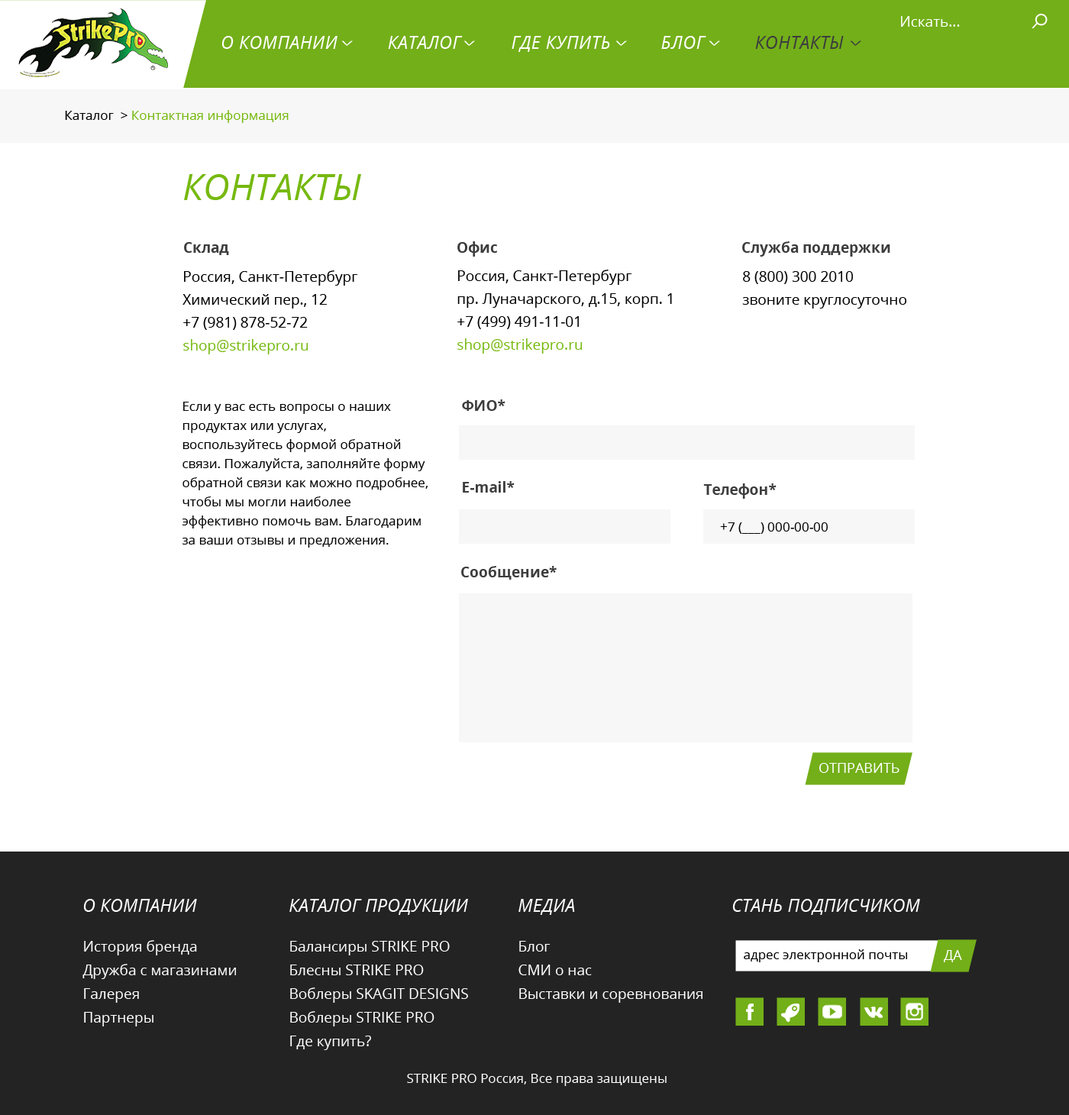
<style>
.page{position:relative;width:1069px;height:1115px;background:#ffffff}
.page>*{position:absolute;margin:0}
.t1{font:14.5px "OpenSans";color:#ffffff}
.t2{font:17.6px "OpenSans-Italic";letter-spacing:0.025em;color:#ffffff;text-transform:uppercase}
.t3{font:17.6px "OpenSans-Italic";letter-spacing:0.025em;color:#3d3d3d;text-transform:uppercase}
.t4{font:22.5px "OpenSans";color:#ffffff;text-transform:uppercase;scale:0.43 1}
.t5{font:22.5px "OpenSans";color:#3d3d3d;text-transform:uppercase;scale:0.43 1}
.t6{font:13px "OpenSans";color:#76b910}
.t7{font:13px "OpenSans";color:#000000}
.t8{font:36.7px "OpenSans-Italic";color:#76b910;text-transform:uppercase}
.t9{font:14.5px "OpenSans-Bold";color:#3d3d3d}
.t10{font:14.5px/22.9px "OpenSans";color:#000000}
.t11{font:14.5px/22.9px "OpenSans";color:#76b910}
.t12{font:13px/19.1px "OpenSans";color:#000000}
.t13{font:13.7px "OpenSans";color:#ffffff;text-transform:uppercase}
.t14{font:17.6px "OpenSans-Italic";letter-spacing:0.01em;color:#ffffff;text-transform:uppercase}
.t15{font:14.5px/23.7px "OpenSans";color:#ffffff}
.t16{font:13px "OpenSans";color:#ffffff}
</style>
<div class="page">
<p class="t1" style="left:901px;top:16px;width:59px;height:11px">Искать...</p>
<p class="t2" style="left:222px;top:36px;width:622px;height:16px">О компании          Каталог          где купить          блог          <span class="t3">контакты</span></p>
<p class="t4" style="left:341px;top:40px;width:12px;height:6px;rotate:90deg">&gt;</p>
<p class="t4" style="left:464px;top:40px;width:11px;height:6px;rotate:90deg">&gt;</p>
<p class="t4" style="left:616px;top:40px;width:11px;height:6px;rotate:90deg">&gt;</p>
<p class="t4" style="left:709px;top:40px;width:11px;height:6px;rotate:90deg">&gt;</p>
<p class="t5" style="left:850px;top:40px;width:12px;height:6px;rotate:90deg">&gt;</p>
<p class="t6" style="left:65px;top:110px;width:224px;height:13px"><span class="t7">Каталог  &gt; </span>Контактная информация</p>
<p class="t8" style="left:184px;top:174px;width:177px;height:26px">Контакты</p>
<p class="t9" style="left:184px;top:242px;width:45px;height:13px">Склад</p>
<p class="t9" style="left:458px;top:241px;width:40px;height:16px">Офис</p>
<p class="t9" style="left:742px;top:241px;width:149px;height:16px">Служба поддержки</p>
<p class="t10" style="left:458px;top:270px;width:214px;height:84px">Россия, Санкт-Петербург<br>пр. Луначарского, д.15, корп. 1<br>+7 (499) 491-11-01<br><span class="t11">shop@strikepro.ru</span></p>
<p class="t10" style="left:183px;top:270px;width:175px;height:84px">Россия, Санкт-Петербург<br>Химический пер., 12<br>+7 (981) 878-52-72<br><span class="t11">shop@strikepro.ru</span></p>
<p class="t10" style="left:742px;top:271px;width:165px;height:38px">8 (800) 300 2010<br>звоните круглосуточно</p>
<p class="t12" style="left:183px;top:402px;width:245px;height:146px">Если у вас есть вопросы о наших продуктах или услугах, воспользуйтесь формой обратной связи. Пожалуйста, заполняйте форму обратной связи как можно подробнее, чтобы мы могли наиболее эффективно помочь вам. Благодарим за ваши отзывы и предложения.</p>
<p class="t9" style="left:462px;top:399px;width:44px;height:12px">ФИО*</p>
<p class="t9" style="left:463px;top:481px;width:52px;height:12px">E-mail*</p>
<p class="t9" style="left:703px;top:483px;width:74px;height:16px">Телефон*</p>
<p class="t7" style="left:720px;top:522px;width:108px;height:12px">+7 (___) 000-00-00</p>
<p class="t9" style="left:461px;top:566px;width:96px;height:14px">Cообщение*</p>
<p class="t13" style="left:820px;top:763px;width:80px;height:10px">ОТПРАВИТЬ</p>
<p class="t14" style="left:83px;top:899px;width:114px;height:13px">о компании</p>
<p class="t14" style="left:289px;top:899px;width:179px;height:16px">каталог продукции</p>
<p class="t14" style="left:519px;top:899px;width:56px;height:16px">Медиа</p>
<p class="t14" style="left:732px;top:899px;width:188px;height:16px">стань подписчиком</p>
<p class="t15" style="left:82px;top:940px;width:154px;height:87px">История бренда<br>Дружба с магазинами<br>Галерея<br>Партнеры</p>
<p class="t15" style="left:290px;top:941px;width:178px;height:109px">Балансиры STRIKE PRO<br>Блесны STRIKE PRO<br>Воблеры SKAGIT DESIGNS<br>Воблеры STRIKE PRO<br>Где купить?</p>
<p class="t15" style="left:519px;top:941px;width:184px;height:62px">Блог<br>СМИ о нас<br>Выставки и соревнования</p>
<p class="t7" style="left:744px;top:949px;width:163px;height:13px">адрес электронной почты</p>
<p class="t13" style="left:944px;top:950px;width:18px;height:12px">Да</p>
<p class="t16" style="left:407px;top:1074px;width:260px;height:12px">STRIKE PRO Россия, Все права защищены</p>
</div>
